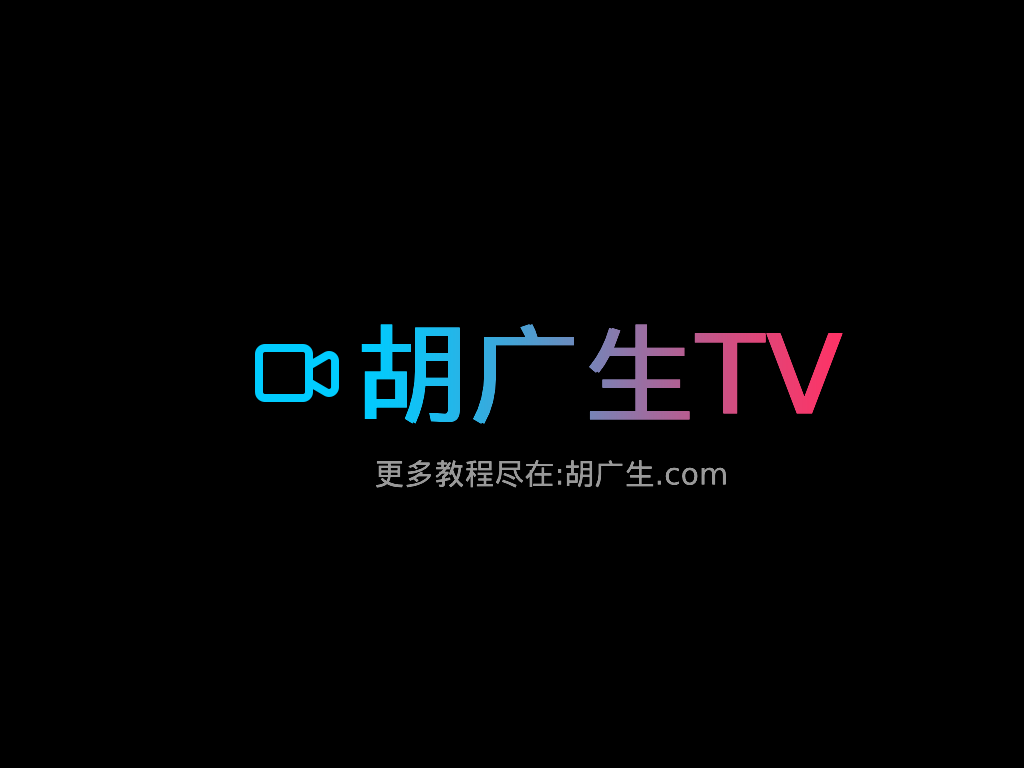
<style>
.page{position:relative;width:1024px;height:768px;background:#000000}
.page>*{position:absolute;margin:0}
.t1{font:110px "MicrosoftYaHei";font-weight:bold}
.t2{font:30px "MicrosoftYaHei";color:#999999}
</style>
<div class="page">
<p class="t1" style="left:361px;top:324px;width:482px;height:100px">胡广生TV</p>
<p class="t2" style="left:376px;top:460px;width:350px;height:28px">更多教程尽在:胡广生.com</p>
</div>
